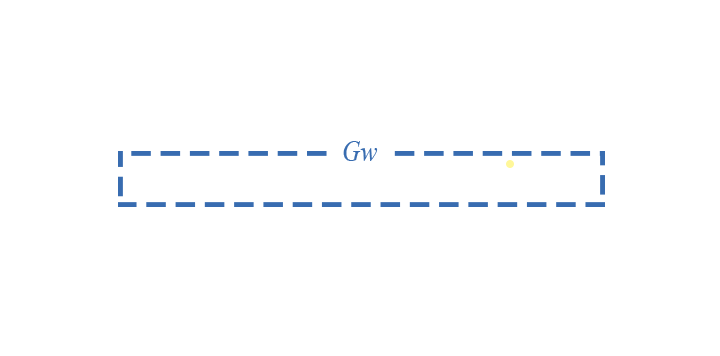
<style>
.page{position:relative;width:720px;height:356px;background:#ffffff}
.page>*{position:absolute;margin:0}
.t1{font:30px "TimesNewRomanPS-ItalicMT";color:#386cb0;scale:0.84 1}
</style>
<div class="page">
<p class="t1" style="left:343px;top:141px;width:35px;height:20px">Gw</p>
</div>
